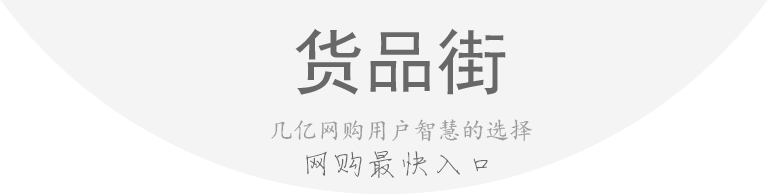
<style>
.page{position:relative;width:768px;height:194px;background:#f4f4f4}
.page>*{position:absolute;margin:0}
.t1{font:72px "SimHei";color:#686868}
.t2{font:24px "¿¬Ìå-Regular";color:#9b9b9b}
</style>
<div class="page">
<p class="t1" style="left:295px;top:28px;width:211px;height:67px">货品街</p>
<p class="t2" style="left:271px;top:119px;width:262px;height:23px">几亿网购用户智慧的选择</p>
</div>
